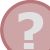
<style>
.page{position:relative;width:50px;height:50px;background:#cea5a7}
.page>*{position:absolute;margin:0}
.t1{font:50px "Verdana-Bold";color:#e1e1e1}
</style>
<div class="page">
<p class="t1" style="left:18px;top:12px;width:26px;height:37px">?</p>
</div>
